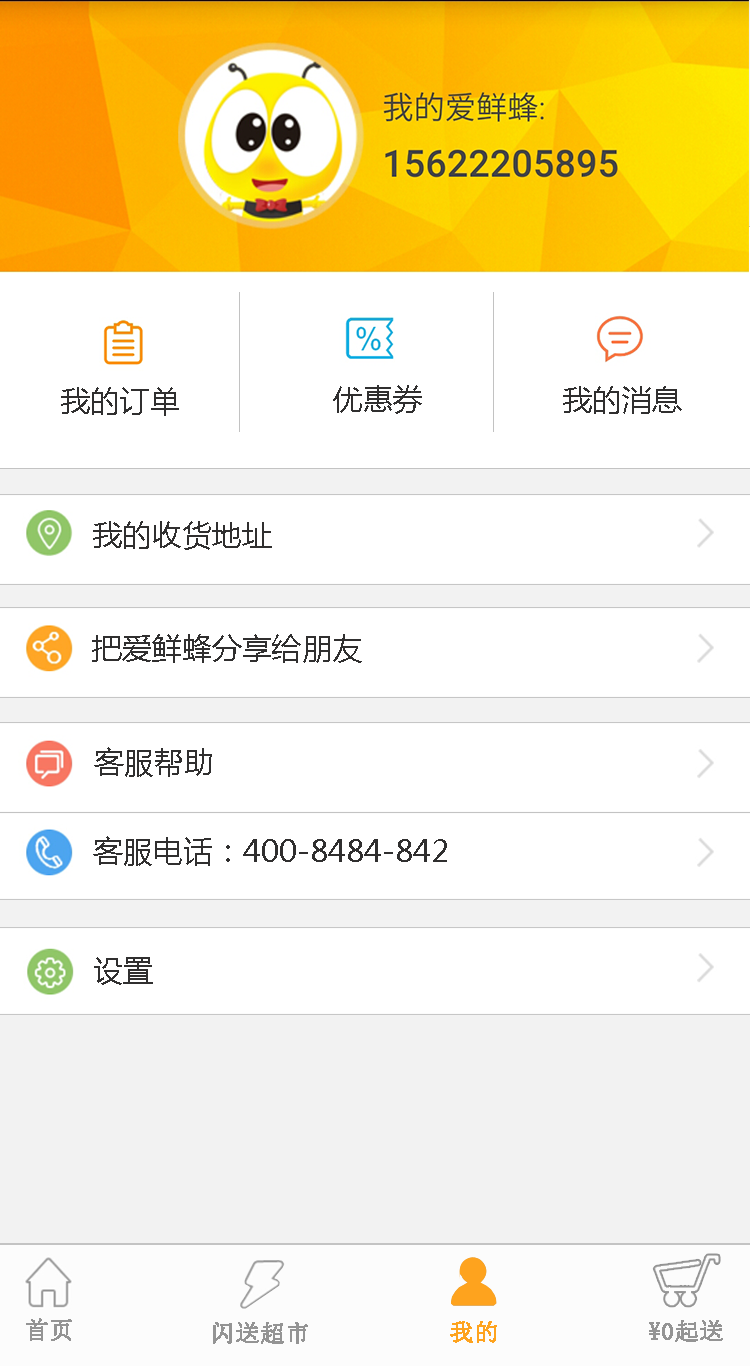
<style>
.page{position:relative;width:750px;height:1366px;background:#ffffff}
.page>*{position:absolute;margin:0}
.t1{font:30px "MicrosoftYaHei";color:#302f2f}
.t2{font:24px "SimSun";color:#949494;font-weight:bold}
.t3{font:24px "SimSun";color:#fea31e;font-weight:bold}
</style>
<div class="page">
<p class="t1" style="left:61px;top:387px;width:118px;height:29px">我的订单</p>
<p class="t1" style="left:333px;top:385px;width:89px;height:29px">优惠券</p>
<p class="t1" style="left:563px;top:386px;width:119px;height:28px">我的消息</p>
<p class="t1" style="left:93px;top:521px;width:179px;height:29px">我的收货地址</p>
<p class="t1" style="left:92px;top:634px;width:270px;height:29px">把爱鲜蜂分享给朋友</p>
<p class="t1" style="left:94px;top:747px;width:118px;height:30px">客服帮助</p>
<p class="t1" style="left:93px;top:836px;width:354px;height:30px">客服电话：400-8484-842</p>
<p class="t1" style="left:94px;top:957px;width:59px;height:28px">设置</p>
<p class="t2" style="left:26px;top:1318px;width:46px;height:23px">首页</p>
<p class="t2" style="left:213px;top:1322px;width:95px;height:22px">闪送超市</p>
<p class="t3" style="left:450px;top:1321px;width:47px;height:22px">我的</p>
<p class="t2" style="left:649px;top:1320px;width:74px;height:22px">¥0起送</p>
</div>
